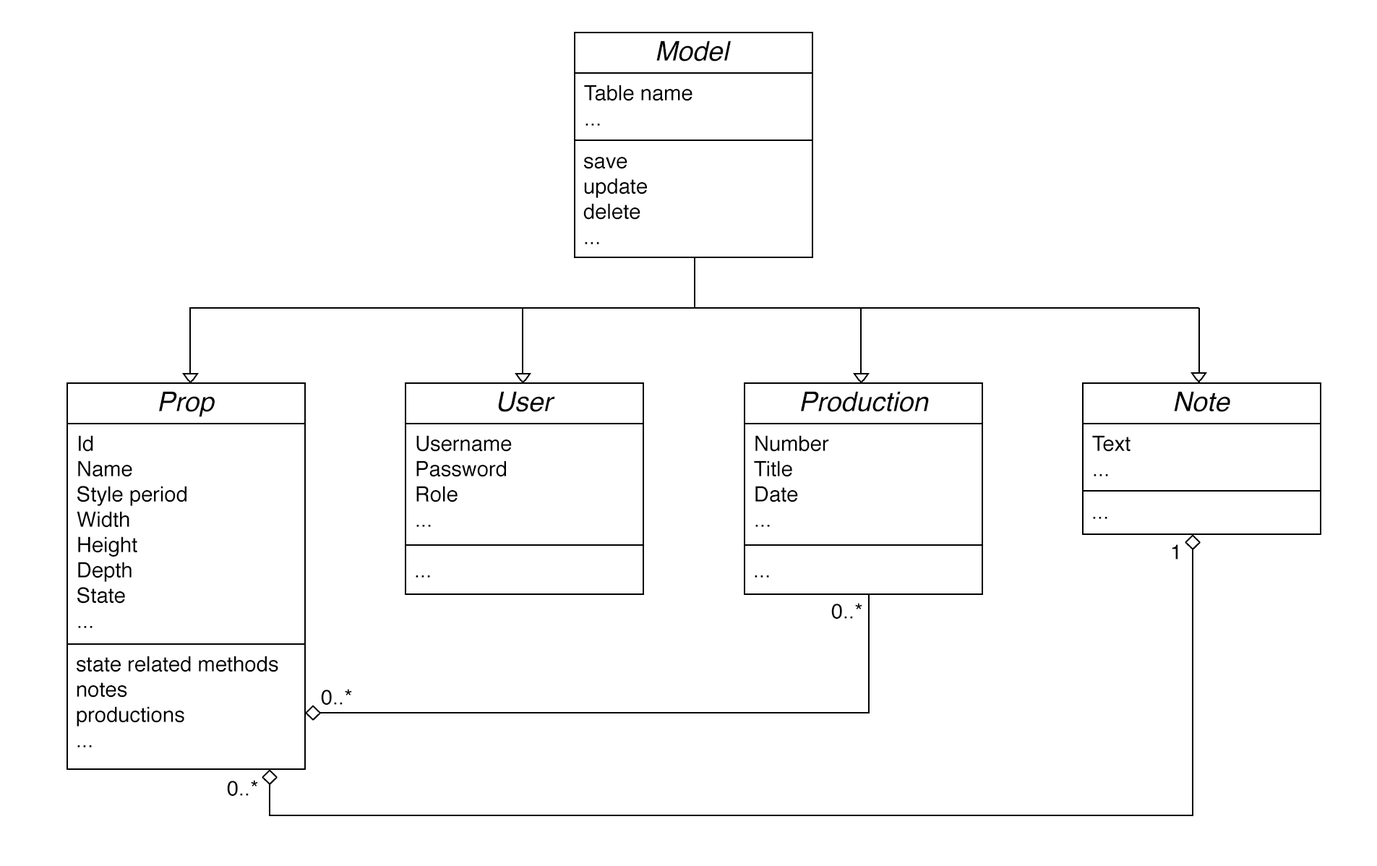
<style>
.page{position:relative;width:1377px;height:866px;background:#ffffff}
.page>*{position:absolute;margin:0}
.t1{font:27.1px "Helvetica-Oblique";color:#000000}
.t2{font:21.1px "Helvetica";color:#000000}
</style>
<div class="page">
<p class="t1" style="left:656px;top:40px;width:75px;height:21px">Model</p>
<p class="t2" style="left:584px;top:85px;width:108px;height:41px">Table name<br>...</p>
<p class="t2" style="left:583px;top:157px;width:64px;height:87px">save<br>update<br>delete<br>...</p>
<p class="t1" style="left:159px;top:391px;width:56px;height:26px">Prop</p>
<p class="t1" style="left:498px;top:391px;width:57px;height:21px">User</p>
<p class="t1" style="left:801px;top:391px;width:128px;height:21px">Production</p>
<p class="t1" style="left:1174px;top:391px;width:56px;height:21px">Note</p>
<p class="t2" style="left:77px;top:435px;width:109px;height:193px">Id<br>Name<br>Style period<br>Width<br>Height<br>Depth<br>State<br>...</p>
<p class="t2" style="left:416px;top:435px;width:96px;height:92px">Username<br>Password<br>Role<br>...</p>
<p class="t2" style="left:754px;top:435px;width:75px;height:92px">Number<br>Title<br>Date<br>...</p>
<p class="t2" style="left:1092px;top:435px;width:39px;height:41px">Text<br>...</p>
<p class="t2" style="left:1093px;top:517px;width:14px;height:2px">...</p>
<p class="t2" style="left:1172px;top:544px;width:6px;height:15px">1</p>
<p class="t2" style="left:416px;top:575px;width:14px;height:3px">...</p>
<p class="t2" style="left:755px;top:575px;width:14px;height:3px">...</p>
<p class="t2" style="left:831px;top:603px;width:31px;height:16px">0..*</p>
<p class="t2" style="left:77px;top:656px;width:201px;height:91px">state related methods<br>notes<br>productions<br>...</p>
<p class="t2" style="left:321px;top:689px;width:31px;height:16px">0..*</p>
<p class="t2" style="left:227px;top:780px;width:31px;height:16px">0..*</p>
</div>
